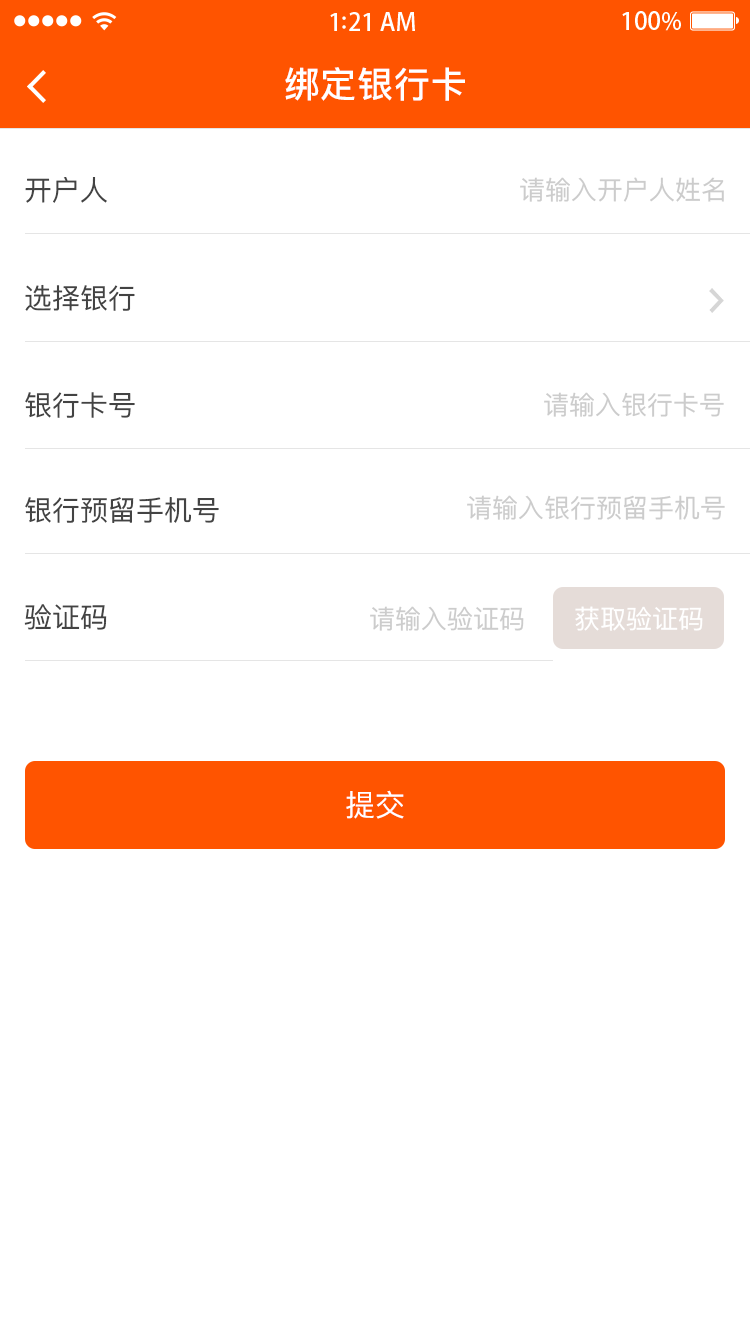
<style>
.page{position:relative;width:750px;height:1334px;background:#ffffff}
.page>*{position:absolute;margin:0}
.t1{font:36px "PingFangSC-Medium";letter-spacing:0.02em;color:#ffffff}
.t2{font:28px "PingFangSC-Regular";color:#434343}
.t3{font:26px "PingFangSC-Regular";color:#cccccc}
.t4{font:26px "PingFangSC-Regular";color:#ffffff}
.t5{font:30px "PingFangSC-Regular";color:#ffffff;text-transform:uppercase}
</style>
<div class="page">
<p class="t1" style="left:285px;top:67px;width:180px;height:34px">绑定银行卡</p>
<p class="t2" style="left:25px;top:177px;width:82px;height:26px">开户人</p>
<p class="t3" style="left:520px;top:177px;width:204px;height:25px">请输入开户人姓名</p>
<p class="t2" style="left:25px;top:284px;width:110px;height:27px">选择银行</p>
<p class="t2" style="left:25px;top:392px;width:110px;height:26px">银行卡号</p>
<p class="t3" style="left:544px;top:392px;width:180px;height:25px">请输入银行卡号</p>
<p class="t2" style="left:25px;top:497px;width:194px;height:26px">银行预留手机号</p>
<p class="t3" style="left:467px;top:495px;width:258px;height:25px">请输入银行预留手机号</p>
<p class="t2" style="left:24px;top:604px;width:83px;height:26px">验证码</p>
<p class="t3" style="left:370px;top:606px;width:154px;height:25px">请输入验证码</p>
<p class="t4" style="left:575px;top:606px;width:128px;height:25px">获取验证码</p>
<p class="t5" style="left:346px;top:790px;width:58px;height:29px">提交</p>
</div>
